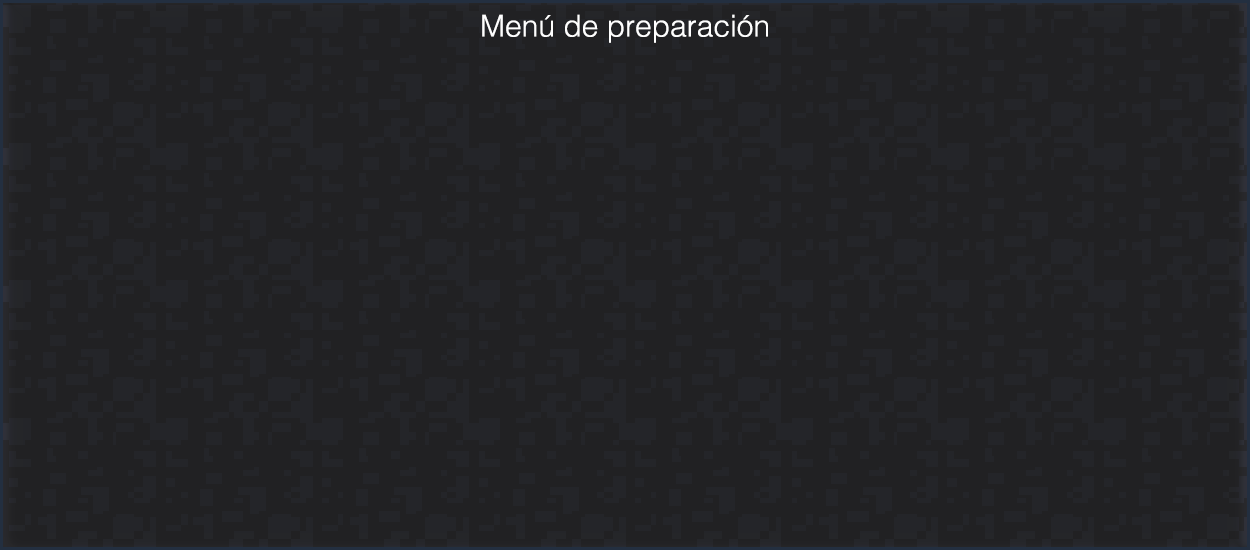
<style>
.page{position:relative;width:1250px;height:550px;background:#212123}
.page>*{position:absolute;margin:0}
.t1{font:30px "HelvLight-Normal";color:#ffffff}
</style>
<div class="page">
<p class="t1" style="left:482px;top:14px;width:286px;height:29px">Menú de preparación</p>
</div>
